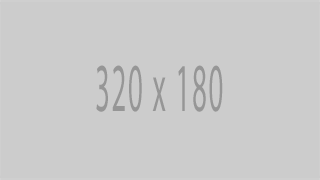
<style>
.page{position:relative;width:320px;height:180px;background:#cccccc}
.page>*{position:absolute;margin:0}
.t1{font:69px "MyriadPro-Regular";letter-spacing:0.07em;color:#969696;scale:0.42 1}
</style>
<div class="page">
<p class="t1" style="left:96px;top:65px;width:127px;height:47px">320 x 180</p>
</div>
